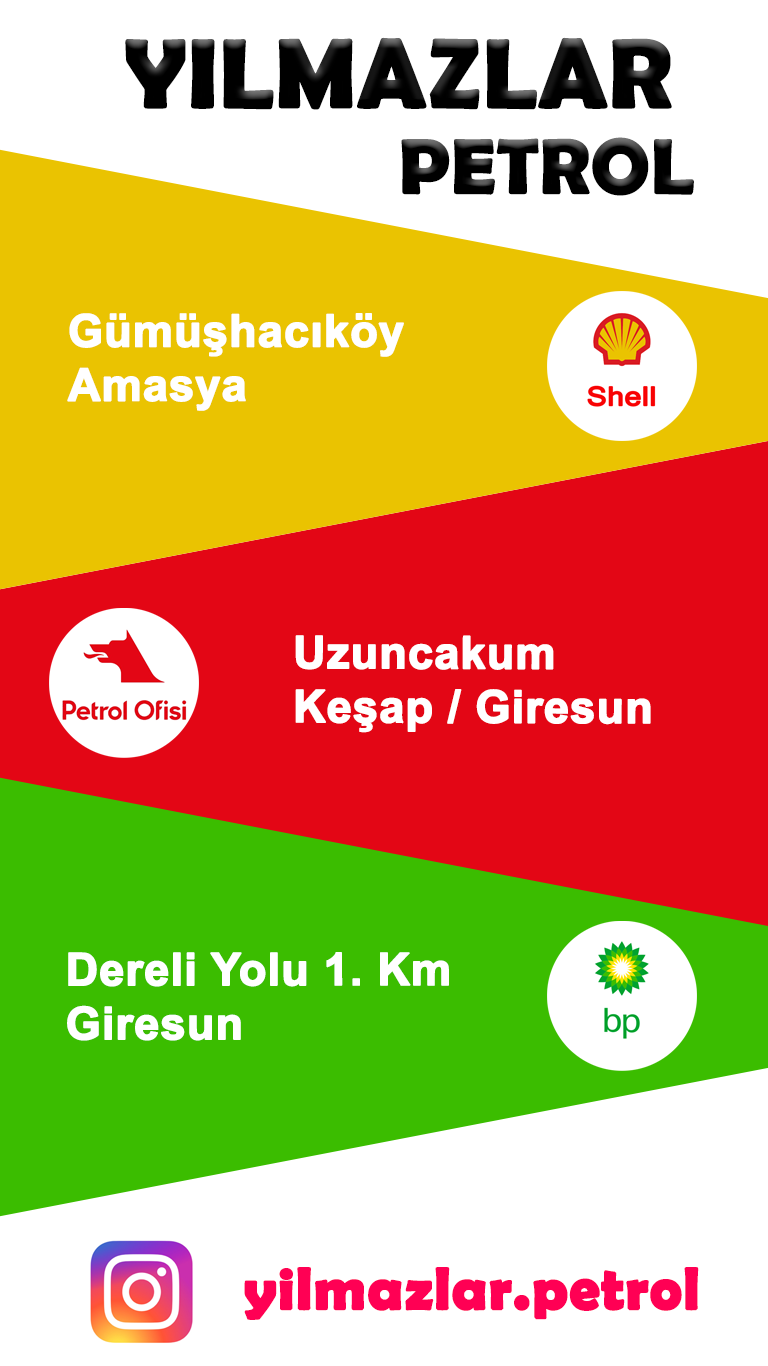
<style>
.page{position:relative;width:768px;height:1366px;background:#ffffff}
.page>*{position:absolute;margin:0}
.t1{font:97.3px "BerlinSansFBDemi-Bold";color:#000000;font-weight:bold}
.t2{font:77.1px "BerlinSansFBDemi-Bold";color:#000000;font-weight:bold}
.t3{font:45px "Arial-BoldMT";color:#ffffff;font-weight:bold}
.t4{font:60px "BerlinSansFBDemi-Bold";color:#ff0054;font-weight:bold}
</style>
<div class="page">
<p class="t1" style="left:125px;top:37px;width:547px;height:73px">YILMAZLAR</p>
<p class="t2" style="left:401px;top:137px;width:293px;height:59px">PETROL</p>
<p class="t3" style="left:67px;top:313px;width:337px;height:98px">Gümüşhacıköy<br>Amasya</p>
<p class="t3" style="left:295px;top:635px;width:356px;height:98px">Uzuncakum<br>Keşap / Giresun</p>
<p class="t3" style="left:67px;top:952px;width:382px;height:89px">Dereli Yolu 1. Km<br>Giresun</p>
<p class="t4" style="left:244px;top:1267px;width:455px;height:53px">yilmazlar.petrol</p>
</div>
